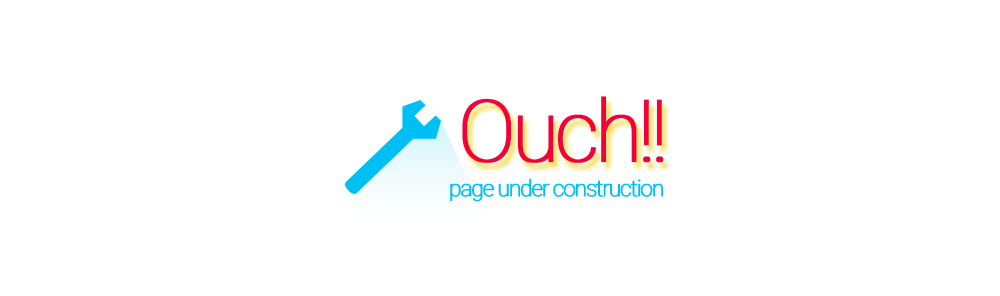
<style>
.page{position:relative;width:1000px;height:296px;background:#ffffff}
.page>*{position:absolute;margin:0}
.t1{font:86.1px "Roboto-Thin";letter-spacing:-0.07em;color:#f30039;font-weight:bold}
.t2{font:22.5px "Roboto-Thin";letter-spacing:-0.07em;color:#00bff3;font-weight:bold}
</style>
<div class="page">
<p class="t1" style="left:462px;top:96px;width:202px;height:67px">Ouch!!</p>
<p class="t2" style="left:450px;top:178px;width:213px;height:24px">page under construction</p>
</div>
